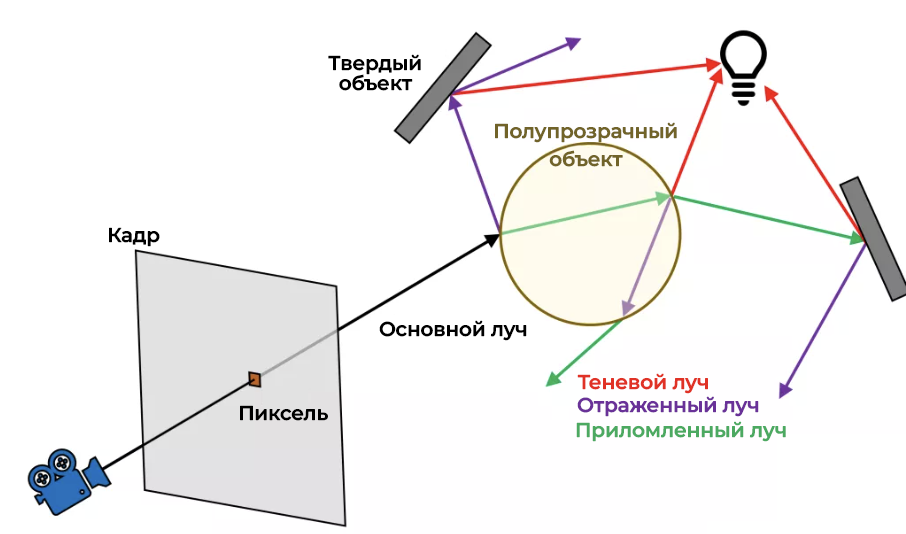
<style>
.page{position:relative;width:906px;height:534px;background:#ffffff}
.page>*{position:absolute;margin:0}
.t1{font:20px/20px "MontserratRoman-SemiBold";letter-spacing:-0.01em;color:#000000}
.t2{font:20px/28px "MontserratRoman-SemiBold";letter-spacing:-0.01em;color:#716329}
.t3{font:20px "MontserratRoman-SemiBold";letter-spacing:-0.01em;color:#000000}
.t4{font:20.1px "MontserratRoman-SemiBold";letter-spacing:-0.01em;color:#e03226}
.t5{font:20.1px "MontserratRoman-SemiBold";letter-spacing:-0.01em;color:#693198}
.t6{font:20.1px "MontserratRoman-SemiBold";letter-spacing:-0.01em;color:#4ca961}
</style>
<div class="page">
<p class="t1" style="left:328px;top:54px;width:93px;height:37px;text-align:center">Твердый<br>объект</p>
<p class="t2" style="left:495px;top:122px;width:182px;height:45px;text-align:center">Полупрозрачный<br>объект</p>
<p class="t3" style="left:109px;top:227px;width:51px;height:20px">Кадр</p>
<p class="t3" style="left:379px;top:320px;width:148px;height:21px">Основной луч</p>
<p class="t4" style="left:577px;top:373px;width:131px;height:21px">Теневой луч</p>
<p class="t5" style="left:577px;top:396px;width:182px;height:21px">Отраженный луч</p>
<p class="t3" style="left:240px;top:405px;width:88px;height:16px">Пиксель</p>
<p class="t6" style="left:576px;top:421px;width:210px;height:21px">Приломленный луч</p>
</div>
